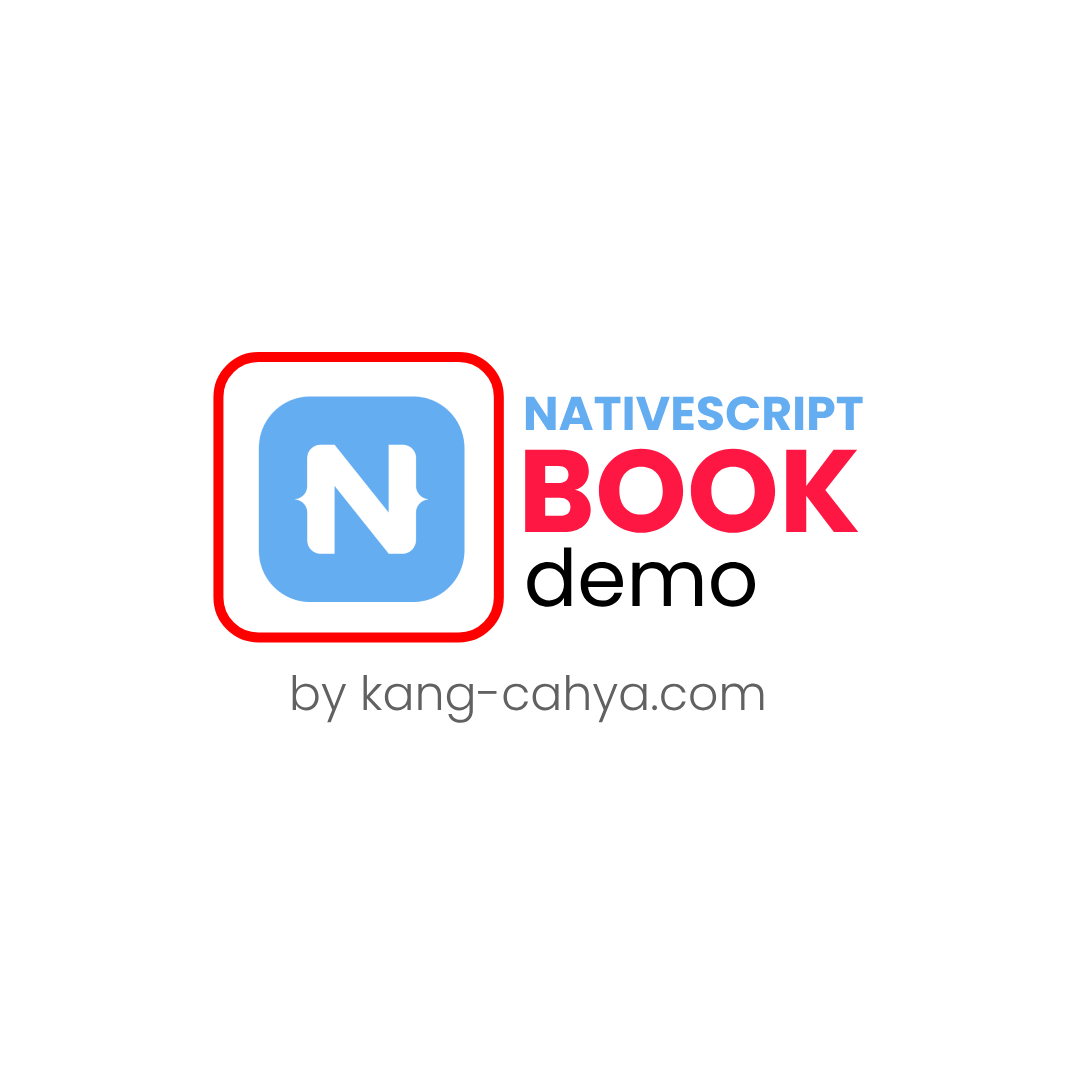
<style>
.page{position:relative;width:1080px;height:1080px;background:#ffffff}
.page>*{position:absolute;margin:0}
.t1{font:47.4px "Poppins-Bold";color:#65adf1}
.t2{font:117px "Poppins-Bold";color:#ff1744}
.t3{font:79.1px "Poppins-Regular";color:#000000}
.t4{font:47.4px "Poppins-Light";color:#616161}
</style>
<div class="page">
<p class="t1" style="left:525px;top:396px;width:338px;height:35px">NATIVESCRIPT</p>
<p class="t2" style="left:525px;top:448px;width:334px;height:85px">BOOK</p>
<p class="t3" style="left:527px;top:547px;width:228px;height:60px">demo</p>
<p class="t4" style="left:292px;top:675px;width:472px;height:48px">by kang-cahya.com</p>
</div>
